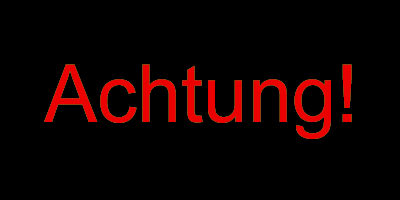
<style>
.page{position:relative;width:400px;height:200px;background:#000001}
.page>*{position:absolute;margin:0}
.t1{font:80.1px "ArialMT";color:#eb0102}
</style>
<div class="page">
<p class="t1" style="left:44px;top:64px;width:308px;height:75px">Achtung!</p>
<p class="t1" style="left:44px;top:64px;width:308px;height:75px">Achtung!</p>
<p class="t1" style="left:44px;top:64px;width:308px;height:75px">Achtung!</p>
</div>
